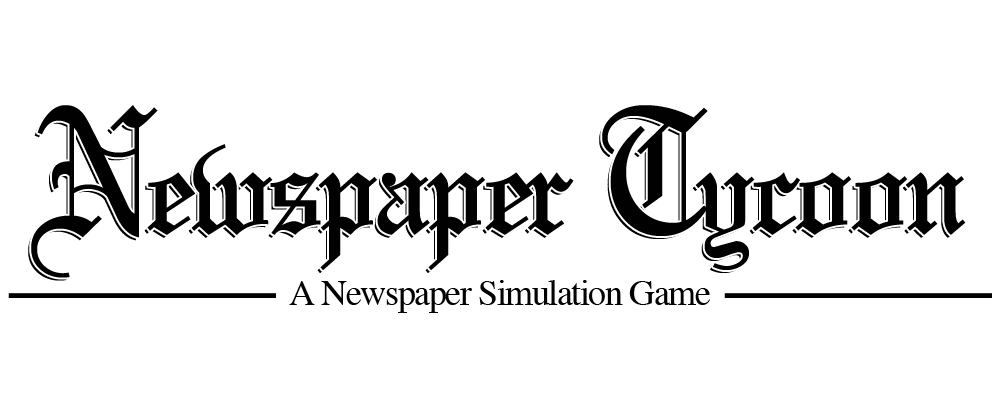
<style>
.page{position:relative;width:1000px;height:400px;background:#ffffff}
.page>*{position:absolute;margin:0}
.t1{font:159.6px "OldeEnglish-Regular";letter-spacing:-0.04em;color:#010101}
.t2{font:191.5px "OldeEnglish-Regular";letter-spacing:-0.04em;color:#010101}
.t3{font:36px "Times-Roman";letter-spacing:-0.04em;color:#010101}
</style>
<div class="page">
<p class="t1" style="left:31px;top:105px;width:935px;height:173px"><span class="t2">N</span>ewspaper <span class="t2">T</span>ycoon</p>
<p class="t3" style="left:289px;top:280px;width:421px;height:33px">A Newspaper Simulation Game</p>
</div>
